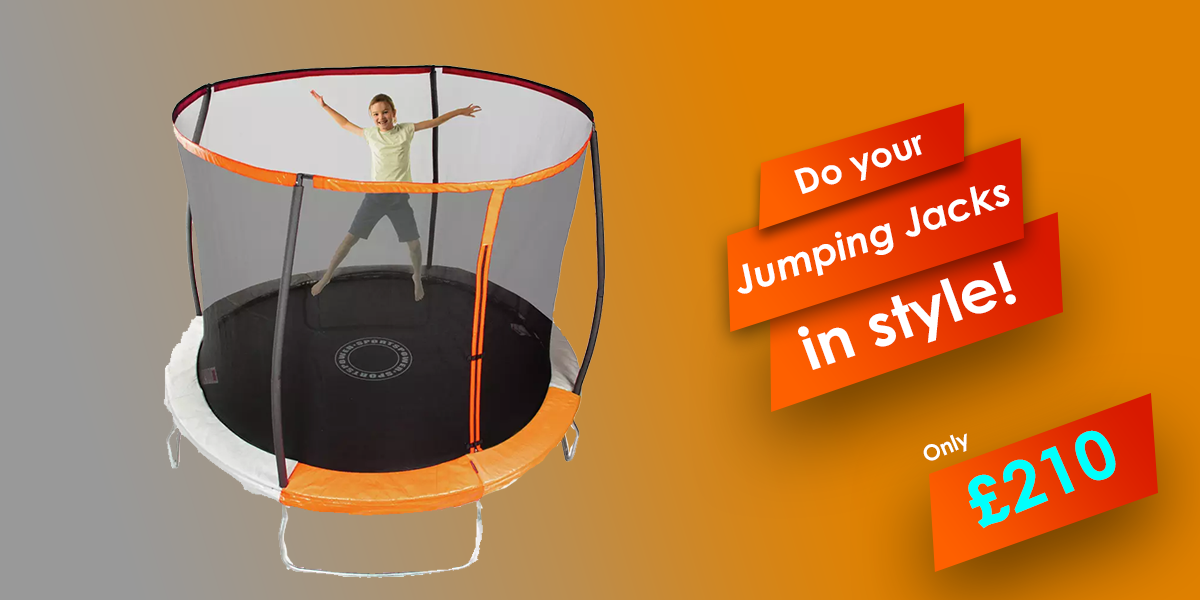
<style>
.page{position:relative;width:1200px;height:600px}
.page>*{position:absolute;margin:0}
.t1{font:34.5px "CenturyGothic-Bold";color:#ffffff;scale:1.03 1}
.t2{font:38.5px "CenturyGothic-BoldItalic";color:#ffffff;scale:1.03 1}
.t3{font:59.5px "CenturyGothic-Bold";color:#ffffff;scale:1.03 1}
.t4{font:21.6px "CenturyGothic-Bold";color:#ffffff}
.t5{font:67.3px "CenturyGothic-Bold";color:#00fffc}
</style>
<div class="page">
<p class="t1" style="left:794px;top:135px;width:128px;height:59px;rotate:-19deg">Do your</p>
<p class="t2" style="left:737px;top:185px;width:273px;height:109px;rotate:-19deg">Jumping Jacks</p>
<p class="t3" style="left:798px;top:260px;width:218px;height:110px;rotate:-19deg">in style!</p>
<p class="t4" style="left:923px;top:433px;width:44px;height:28px;rotate:-23deg">Only</p>
<p class="t5" style="left:968px;top:430px;width:148px;height:99px;rotate:-22deg">£210</p>
</div>
